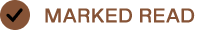
<style>
.page{position:relative;width:205px;height:30px;background:#ffffff}
.page>*{position:absolute;margin:0}
.t1{font:20px "PPTelegraf-Regular";letter-spacing:0.026em;color:#865336;font-weight:bold}
</style>
<div class="page">
<p class="t1" style="left:45px;top:8px;width:150px;height:15px">MARKED READ</p>
</div>
